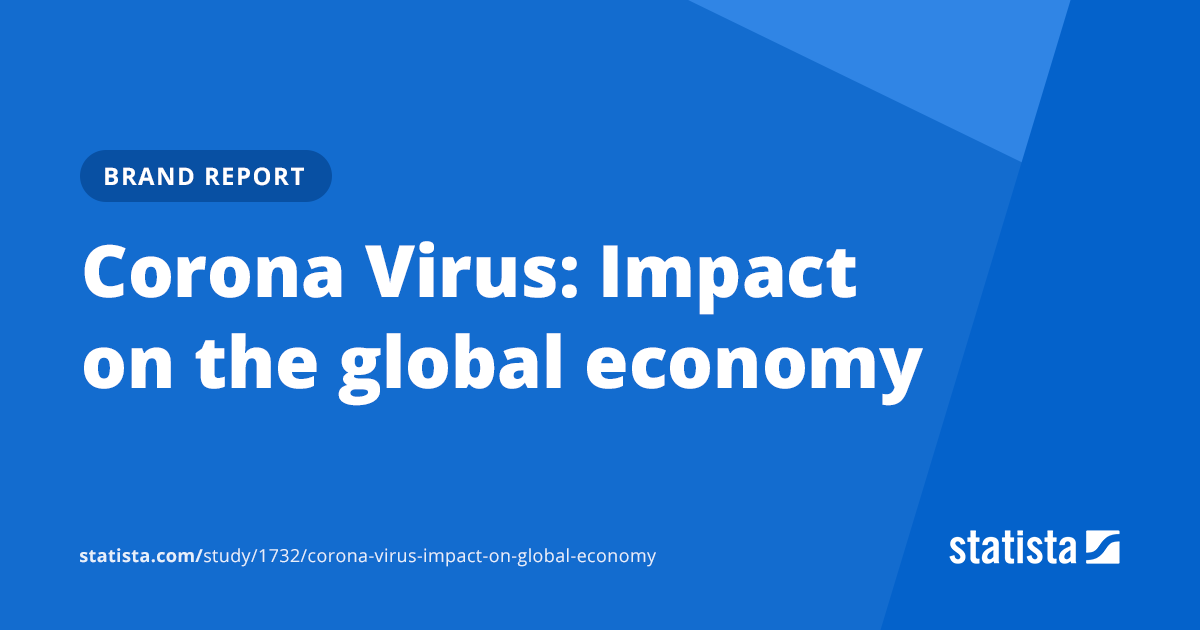
<style>
.page{position:relative;width:1200px;height:630px;background:#136ccf}
.page>*{position:absolute;margin:0}
.t1{font:24px "OpenSans-Bold";letter-spacing:0.06em;color:#ffffff;text-transform:uppercase}
.t2{font:72px/91px "OpenSans-ExtraBold";color:#ffffff}
.t3{font:18px "OpenSans";letter-spacing:0.02em;color:#e6f0fa}
.t4{font:18px "OpenSans-Bold";letter-spacing:0.02em;color:#e6f0fa}
</style>
<div class="page">
<p class="t1" style="left:105px;top:167px;width:199px;height:19px">Brand Report</p>
<p class="t2" style="left:84px;top:241px;width:839px;height:165px">Corona Virus: Impact on the global economy</p>
<p class="t3" style="left:80px;top:548px;width:576px;height:19px"><span class="t4">statista.com/</span>study/1732/corona-virus-impact-on-global-economy</p>
</div>
